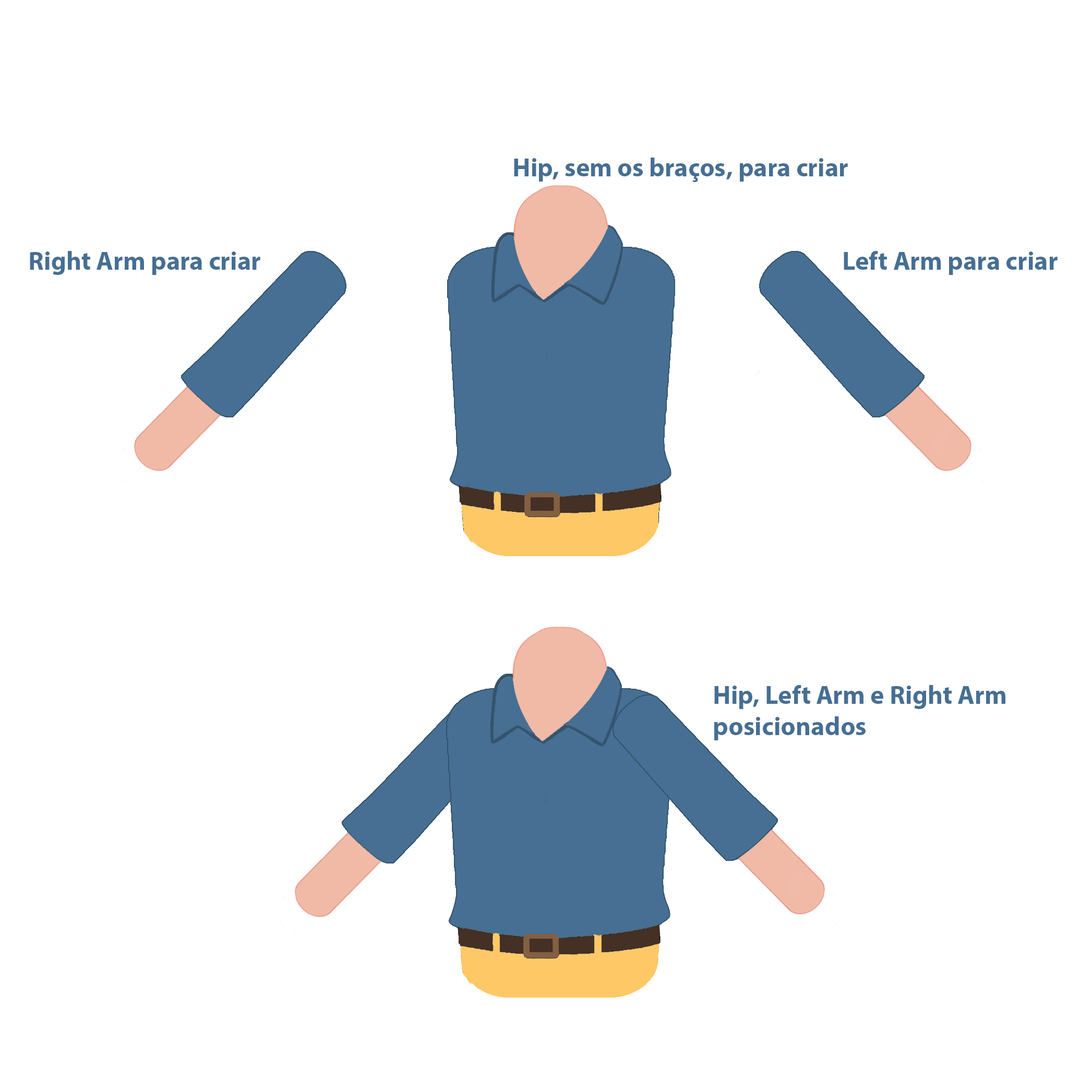
<style>
.page{position:relative;width:1092px;height:1092px;background:#ffffff}
.page>*{position:absolute;margin:0}
.t1{font:26.1px "MyriadHebrew-Bold";color:#466f93}
</style>
<div class="page">
<p class="t1" style="left:514px;top:158px;width:334px;height:24px">Hip, sem os braços, para criar</p>
<p class="t1" style="left:30px;top:251px;width:230px;height:24px">Right Arm para criar</p>
<p class="t1" style="left:844px;top:251px;width:214px;height:24px">Left Arm para criar</p>
<p class="t1" style="left:714px;top:685px;width:291px;height:55px">Hip, Left Arm e Right Arm<br>posicionados</p>
</div>
